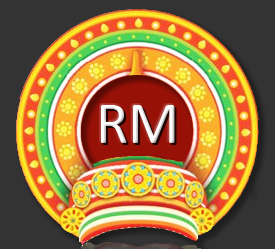
<style>
.page{position:relative;width:275px;height:249px;background:#333333}
.page>*{position:absolute;margin:0}
.t1{font:60px "Calibri";color:#ffffff}
</style>
<div class="page">
<p class="t1" style="left:101px;top:105px;width:74px;height:38px">RM</p>
</div>
